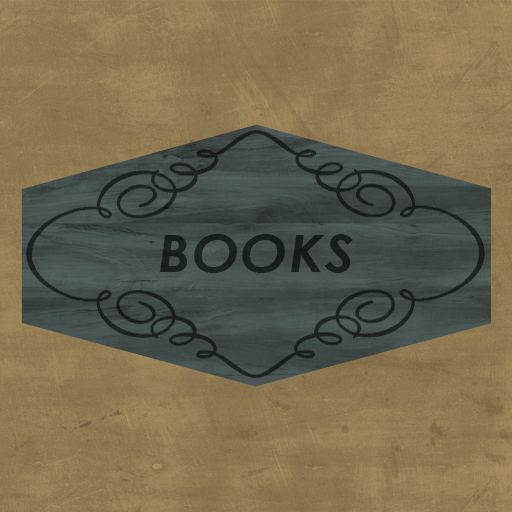
<style>
.page{position:relative;width:512px;height:512px}
.page>*{position:absolute;margin:0}
.t1{font:52px "CenturyGothic-BoldItalic";letter-spacing:0.025em;color:#191f1d;text-transform:uppercase;scale:1.07 1}
</style>
<div class="page">
<p class="t1" style="left:160px;top:234px;width:193px;height:39px">books</p>
</div>
